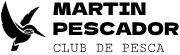
<style>
.page{position:relative;width:180px;height:55px;background:#ffffff}
.page>*{position:absolute;margin:0}
.t1{font:17.4px "DelaGothicOne-Regular";color:#000000}
.t2{font:14.2px "CutiveMono-Regular"}
</style>
<div class="page">
<p class="t1" style="left:53px;top:2px;width:126px;height:34px">MARTIN <br>PESCADOR</p>
<p class="t2" style="left:53px;top:43px;width:112px;height:9px">CLUB DE PESCA</p>
</div>
